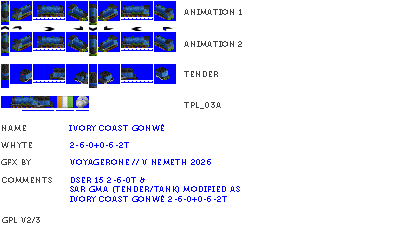
<style>
.page{position:relative;width:400px;height:230px;background:#ffffff}
.page>*{position:absolute;margin:0}
.t1{font:8px "Museo700-Regular";letter-spacing:0.075em;color:#404040;text-transform:uppercase}
.t2{font:8px "Museo700-Regular";letter-spacing:0.075em;color:#0000ff;text-transform:uppercase}
</style>
<div class="page">
<p class="t1" style="left:184px;top:9px;width:58px;height:6px">Animation 1</p>
<p class="t1" style="left:184px;top:41px;width:58px;height:6px">Animation 2</p>
<p class="t1" style="left:184px;top:71px;width:34px;height:6px">tender</p>
<p class="t1" style="left:184px;top:102px;width:37px;height:7px">tpl_03a</p>
<p class="t1" style="left:2px;top:125px;width:24px;height:6px">name</p>
<p class="t2" style="left:69px;top:124px;width:95px;height:7px">Ivory Coast Gonwé</p>
<p class="t1" style="left:1px;top:142px;width:31px;height:6px">whyte</p>
<p class="t2" style="left:70px;top:142px;width:59px;height:6px">2-6-0+0-6-2T</p>
<p class="t1" style="left:1px;top:159px;width:30px;height:6px">gfx by</p>
<p class="t2" style="left:70px;top:159px;width:141px;height:6px">voyagerone // V Nemeth 2026</p>
<p class="t1" style="left:2px;top:177px;width:50px;height:6px">comments</p>
<p class="t2" style="left:70px;top:177px;width:170px;height:25px">DSER 15 2-6-0T &amp;<br>SAR GMA (Tender/Tank) Modified as<br>Ivory Coast Gonwé 2-6-0+0-6-2T</p>
<p class="t1" style="left:2px;top:217px;width:38px;height:6px">gpl v2/3</p>
</div>
